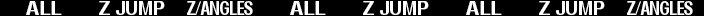
<style>
.page{position:relative;width:704px;height:16px;background:#000000}
.page>*{position:absolute;margin:0}
.t1{font:17px "FolkPro-Heavy";color:#ffffff}
.t2{font:17px "FolkPro-Heavy";color:#ffffff;scale:0.92 1}
.t3{font:17px "FolkPro-Heavy";color:#ffffff;scale:0.7 1}
</style>
<div class="page">
<p class="t1" style="left:26px;top:1px;width:36px;height:14px">ALL</p>
<p class="t2" style="left:99px;top:1px;width:66px;height:14px">Z JUMP</p>
<p class="t3" style="left:187px;top:1px;width:66px;height:14px">Z/ANGLES</p>
<p class="t1" style="left:290px;top:1px;width:36px;height:14px">ALL</p>
<p class="t2" style="left:363px;top:1px;width:66px;height:14px">Z JUMP</p>
<p class="t1" style="left:466px;top:1px;width:36px;height:14px">ALL</p>
<p class="t2" style="left:539px;top:1px;width:66px;height:14px">Z JUMP</p>
<p class="t3" style="left:627px;top:1px;width:66px;height:14px">Z/ANGLES</p>
</div>
